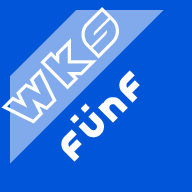
<style>
.page{position:relative;width:192px;height:192px;background:#0055d8}
.page>*{position:absolute;margin:0}
.t1{font:50px "AstralDelightUpright";letter-spacing:0.1em;color:#ffffff}
.t2{font:50px "AstralDelightUpright";letter-spacing:0.15em;color:#ffffff}
.t3{font:36px "AstralDelightBlackUpright";letter-spacing:0.15em;color:#ffffff}
</style>
<div class="page">
<p class="t1" style="left:1px;top:7px;width:118px;height:117px;rotate:-45deg"><span class="t2">W</span>KS</p>
<p class="t3" style="left:61px;top:70px;width:79px;height:92px;rotate:-45deg">FUNF</p>
</div>
